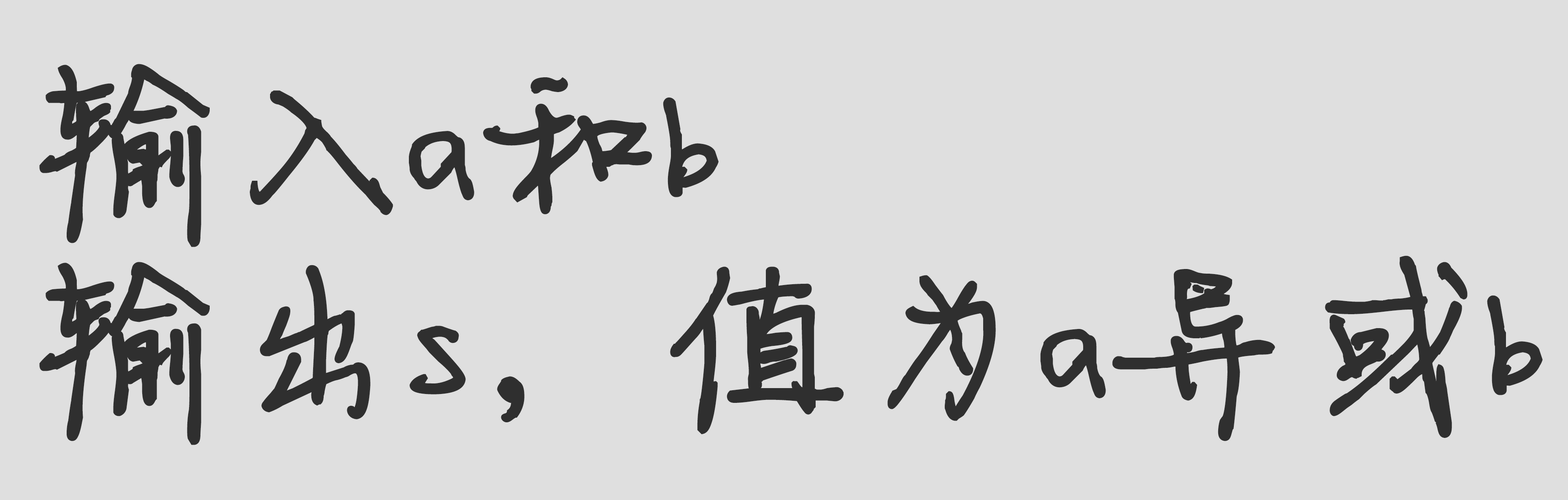
<style>
.page{position:relative;width:1568px;height:500px;background:#dfdfdf}
.page>*{position:absolute;margin:0}
.t1{font:199.1px/216.4px "FZJLJW--GB1-0";letter-spacing:-0.06em;color:#2f2f2f;font-weight:bold}
</style>
<div class="page">
<p class="t1" style="left:39px;top:64px;width:1504px;height:381px">输入a和b<br>输出s，值为a异或b</p>
</div>
